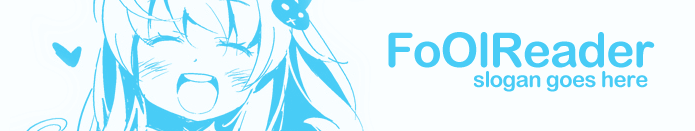
<style>
.page{position:relative;width:695px;height:131px;background:#fafeff}
.page>*{position:absolute;margin:0}
.t1{font:48px "ArialRoundedMTBold";letter-spacing:-0.025em;color:#48ccf6}
.t2{font:22px "ArialRoundedMTBold";letter-spacing:-0.025em;color:#48ccf6}
</style>
<div class="page">
<p class="t1" style="left:388px;top:32px;width:267px;height:36px">FoOlReader</p>
<p class="t2" style="left:473px;top:71px;width:175px;height:21px">slogan goes here</p>
</div>
